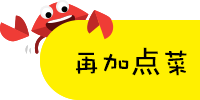
<style>
.page{position:relative;width:200px;height:100px;background:#fff000}
.page>*{position:absolute;margin:0}
.t1{font:30px "DFWaWaTC-W5";color:#000000}
.t2{font:30px "SimHei";color:#000000}
</style>
<div class="page">
<p class="t1" style="left:76px;top:47px;width:111px;height:29px">再加<span class="t2">点</span>菜</p>
</div>
